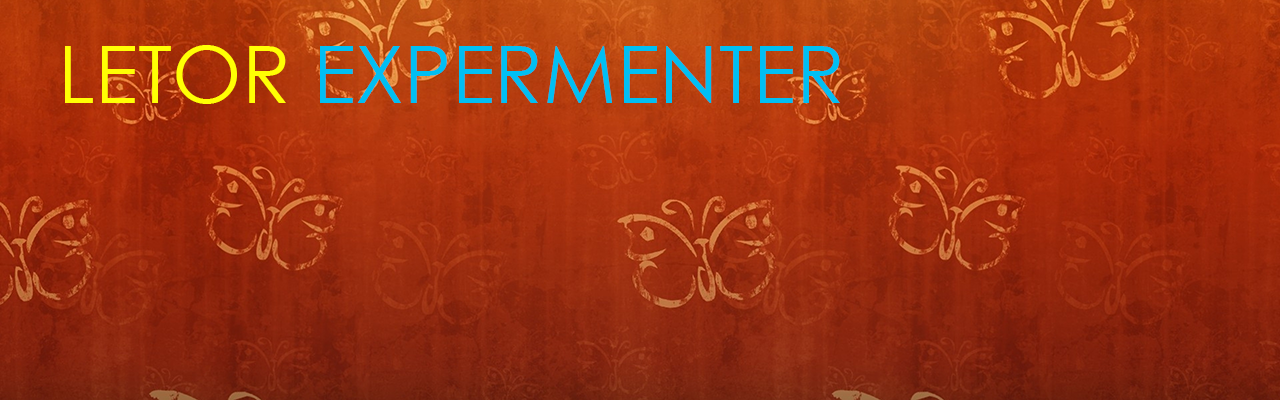
<style>
.page{position:relative;width:1280px;height:400px}
.page>*{position:absolute;margin:0}
.t1{font:80px "CenturyGothic";color:#00bff3}
.t2{font:80px "CenturyGothic";color:#ffff04}
</style>
<div class="page">
<p class="t1" style="left:65px;top:45px;width:775px;height:59px"><span class="t2">LETOR </span>EXPERMENTER</p>
</div>
